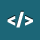
<style>
.page{position:relative;width:40px;height:40px;background:#1c6677}
.page>*{position:absolute;margin:0}
.t1{font:20px "Roboto-BoldCondensed";color:#ffffff;font-weight:bold}
</style>
<div class="page">
<p class="t1" style="left:7px;top:11px;width:26px;height:17px">&lt;/&gt;</p>
</div>
